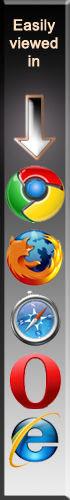
<style>
.page{position:relative;width:70px;height:500px}
.page>*{position:absolute;margin:0}
.t1{font:15px "ArialMT";color:#fddebf;font-weight:bold}
</style>
<div class="page">
<p class="t1" style="left:9px;top:19px;width:49px;height:48px;text-align:center">Easily viewed in</p>
</div>
